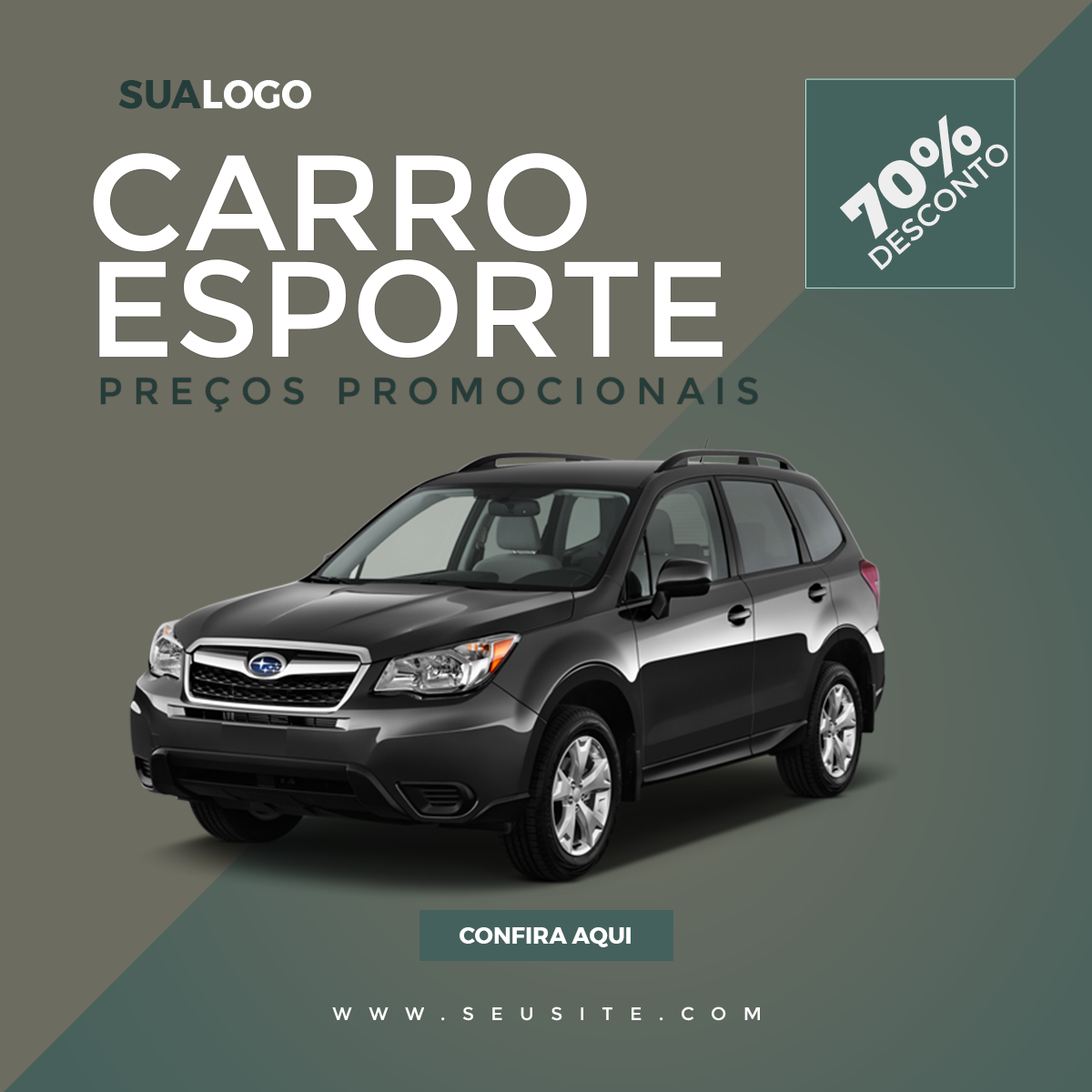
<style>
.page{position:relative;width:1092px;height:1092px;background:#6d6c60}
.page>*{position:absolute;margin:0}
.t1{font:39.2px "Montserrat-Bold";color:#fdffff;text-transform:uppercase}
.t2{font:39.2px "Montserrat-Bold";color:#253d3a;text-transform:uppercase}
.t3{font:30.2px/27.6px "Montserrat-Regular";color:#efeeee;text-transform:uppercase}
.t4{font:67.2px/27.6px "Montserrat-Black";color:#efeeee;text-transform:uppercase}
.t5{font:135.4px/106.3px "Montserrat-Regular";color:#ffffff;text-transform:uppercase}
.t6{font:37.3px "Montserrat-Regular";letter-spacing:0.28em;color:#253d3a;text-transform:uppercase}
.t7{font:23.3px "Montserrat-Bold";color:#ffffff;text-transform:uppercase}
.t8{font:18.2px "Montserrat-Regular";letter-spacing:0.9em;color:#ffffff}
</style>
<div class="page">
<p class="t1" style="left:118px;top:80px;width:193px;height:29px"><span class="t2">sua</span>logo</p>
<p class="t3" style="left:839px;top:115px;width:169px;height:155px;text-align:center;rotate:-41deg"><span class="t4">70%<br></span>desconto</p>
<p class="t5" style="left:93px;top:153px;width:630px;height:206px">carro<br>esporte</p>
<p class="t6" style="left:101px;top:377px;width:657px;height:35px">preços promocionais</p>
<p class="t7" style="left:460px;top:927px;width:171px;height:20px">confira aqui</p>
<p class="t8" style="left:332px;top:1006px;width:428px;height:15px">WWW.SEUSITE.COM</p>
</div>
